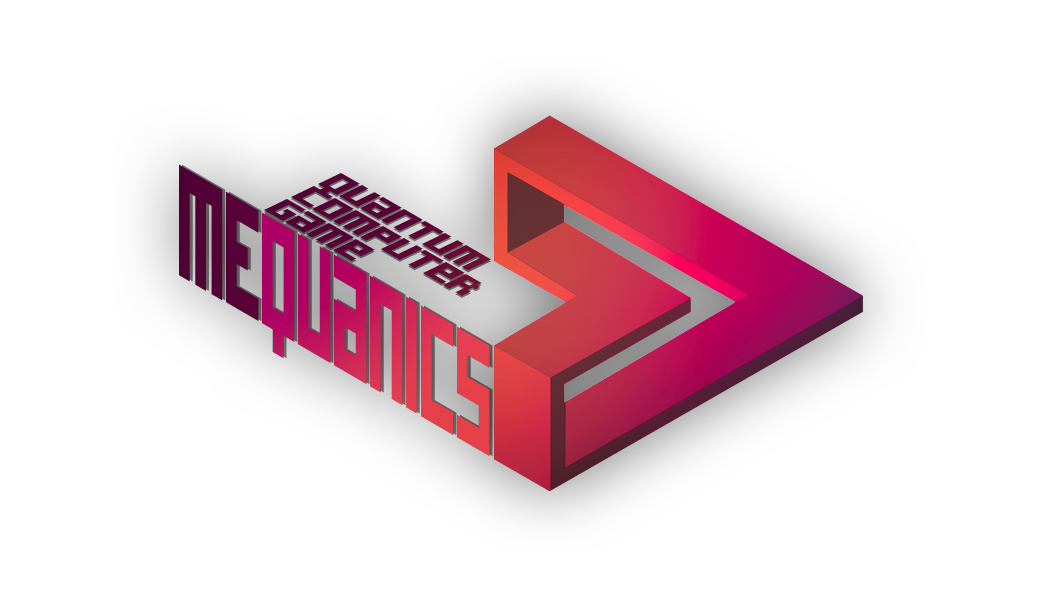
<style>
.page{position:relative;width:1043px;height:607px;background:#ffffff}
.page>*{position:absolute;margin:0}
.t1{font:294.8px "AcknowledgeTT-BRK-";letter-spacing:-0.025em;scale:0.28 1}
.t2{font:67.3px/29.9px "AcknowledgeTT-BRK-";letter-spacing:-0.025em;color:#590135;scale:0.72 1}
</style>
<div class="page">
<p class="t1" style="left:179px;top:164px;width:311px;height:292px;rotate:30deg">mEqUanics</p>
<p class="t2" style="left:264px;top:173px;width:227px;height:123px;rotate:30deg">quantum <br>computer <br>Game</p>
</div>
